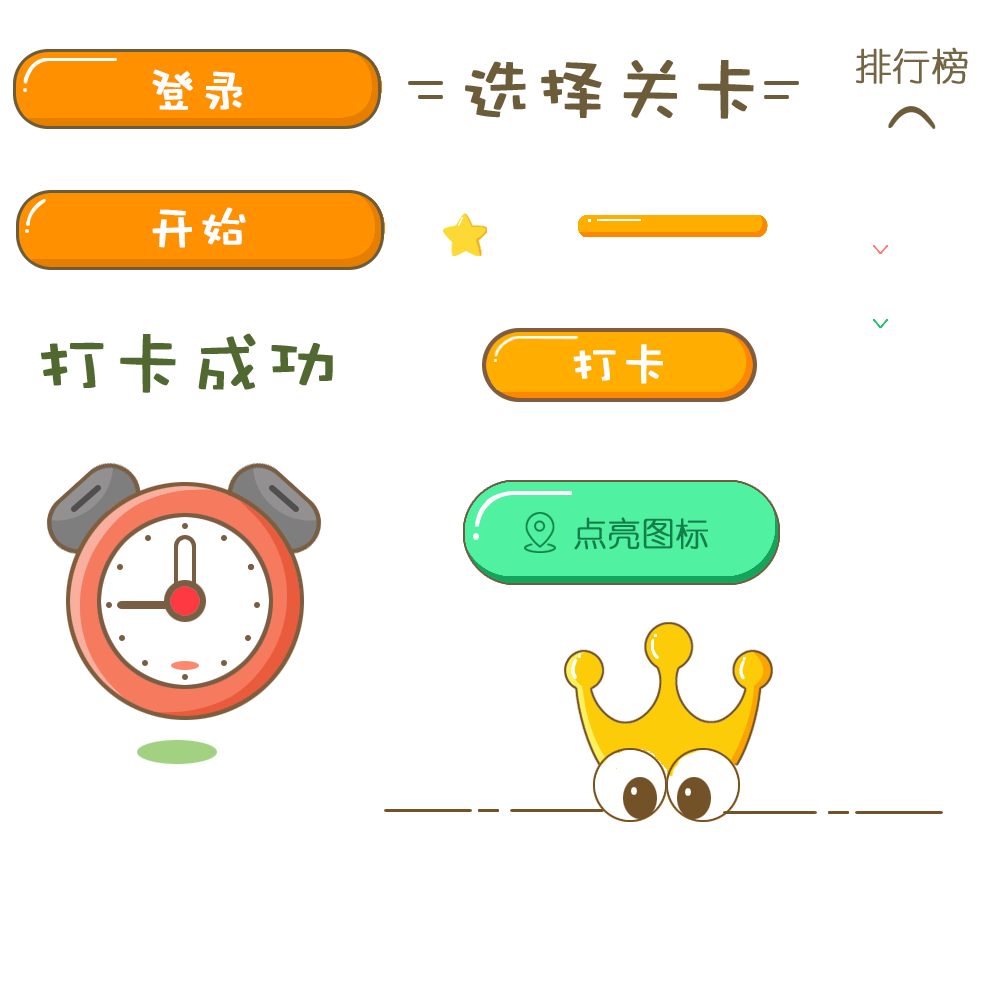
<style>
.page{position:relative;width:1000px;height:1000px;background:#ffffff}
.page>*{position:absolute;margin:0}
.t1{font:37.5px "YouYuan";color:#746545;font-weight:bold}
.t2{font:75px "DFPWaWaW5";color:#6d5c39;font-weight:bold}
.t3{font:50px "DFPWaWaW5";color:#ffffff;font-weight:bold}
.t4{font:75px "DFPWaWaW5";color:#516830;font-weight:bold}
.t5{font:12px "DFPWaWaW5";color:#ffffff;font-weight:bold}
.t6{font:33.3px "YouYuan";color:#127f48;font-weight:bold}
</style>
<div class="page">
<p class="t1" style="left:856px;top:47px;width:112px;height:38px">排行榜</p>
<p class="t2" style="left:465px;top:60px;width:289px;height:59px">选择关卡</p>
<p class="t3" style="left:152px;top:69px;width:91px;height:41px">登录</p>
<p class="t3" style="left:152px;top:207px;width:94px;height:41px">开始</p>
<p class="t4" style="left:41px;top:333px;width:292px;height:60px">打卡成功</p>
<p class="t5" style="left:573px;top:344px;width:90px;height:40px">打卡</p>
<p class="t6" style="left:574px;top:517px;width:134px;height:33px">点亮图标</p>
</div>
